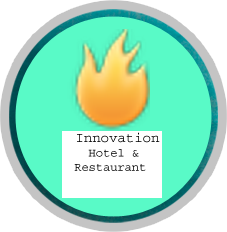
<style>
.page{position:relative;width:227px;height:232px;background:#ffffff}
.page>*{position:absolute;margin:0}
.t1{font:12px "Courier";color:#000000}
.t2{font:14px "Courier";color:#000000}
</style>
<div class="page">
<p class="t1" style="left:74px;top:132px;width:86px;height:39px"><span class="t2"> Innovation</span> <br>   Hotel &amp; <br> Restaurant</p>
</div>
